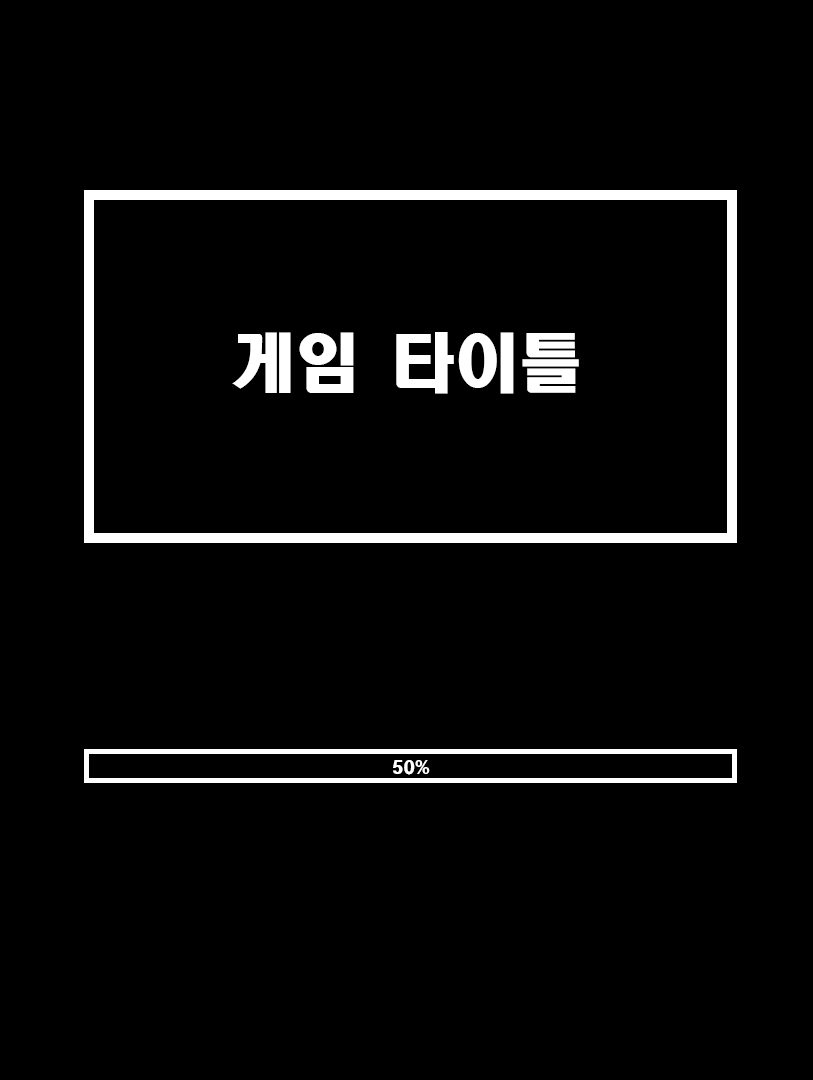
<style>
.page{position:relative;width:813px;height:1080px;background:#000000}
.page>*{position:absolute;margin:0}
.t1{font:64px "HeadlineR-HM";color:#ffffff}
.t2{font:16px "HeadlineR-HM";color:#ffffff}
</style>
<div class="page">
<p class="t1" style="left:232px;top:332px;width:347px;height:62px">게임 타이틀</p>
<p class="t2" style="left:393px;top:760px;width:37px;height:15px">50%</p>
</div>
